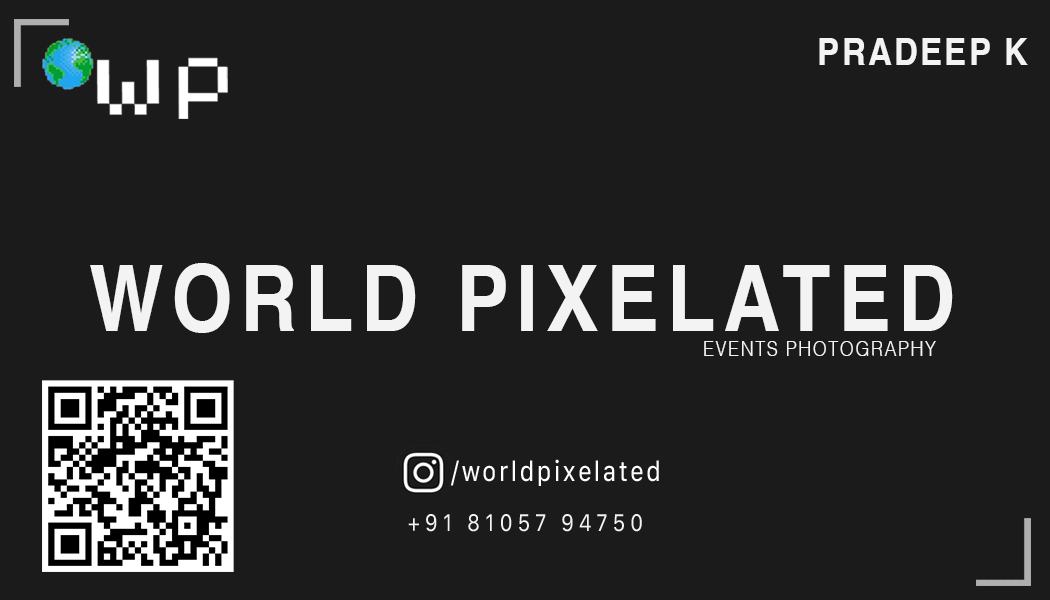
<style>
.page{position:relative;width:1050px;height:600px;background:#1b1b1b}
.page>*{position:absolute;margin:0}
.t1{font:37.5px "Helvetica-Bold";letter-spacing:0.08em;color:#f3f3f3;scale:0.87 1}
.t2{font:90.6px "Helvetica-Bold";letter-spacing:0.1em;color:#f3f3f3;scale:0.87 1}
.t3{font:20.8px "Helvetica-Light";letter-spacing:0.08em;color:#f3f3f3;scale:0.87 1}
.t4{font:29.2px "SFCompact-Regular";letter-spacing:0.08em;color:#ffffff;scale:0.87 1}
.t5{font:25px "SFCompact-Regular";letter-spacing:0.22em;color:#f3f3f3;scale:0.87 1}
</style>
<div class="page">
<p class="t1" style="left:819px;top:38px;width:209px;height:27px">PRADEEP K</p>
<p class="t2" style="left:90px;top:263px;width:863px;height:70px">WORLD PIXELATED</p>
<p class="t3" style="left:704px;top:341px;width:232px;height:15px">EVENTS PHOTOGRAPHY</p>
<p class="t4" style="left:450px;top:459px;width:209px;height:27px">/worldpixelated</p>
<p class="t5" style="left:408px;top:514px;width:234px;height:18px">+91 81057 94750</p>
</div>
